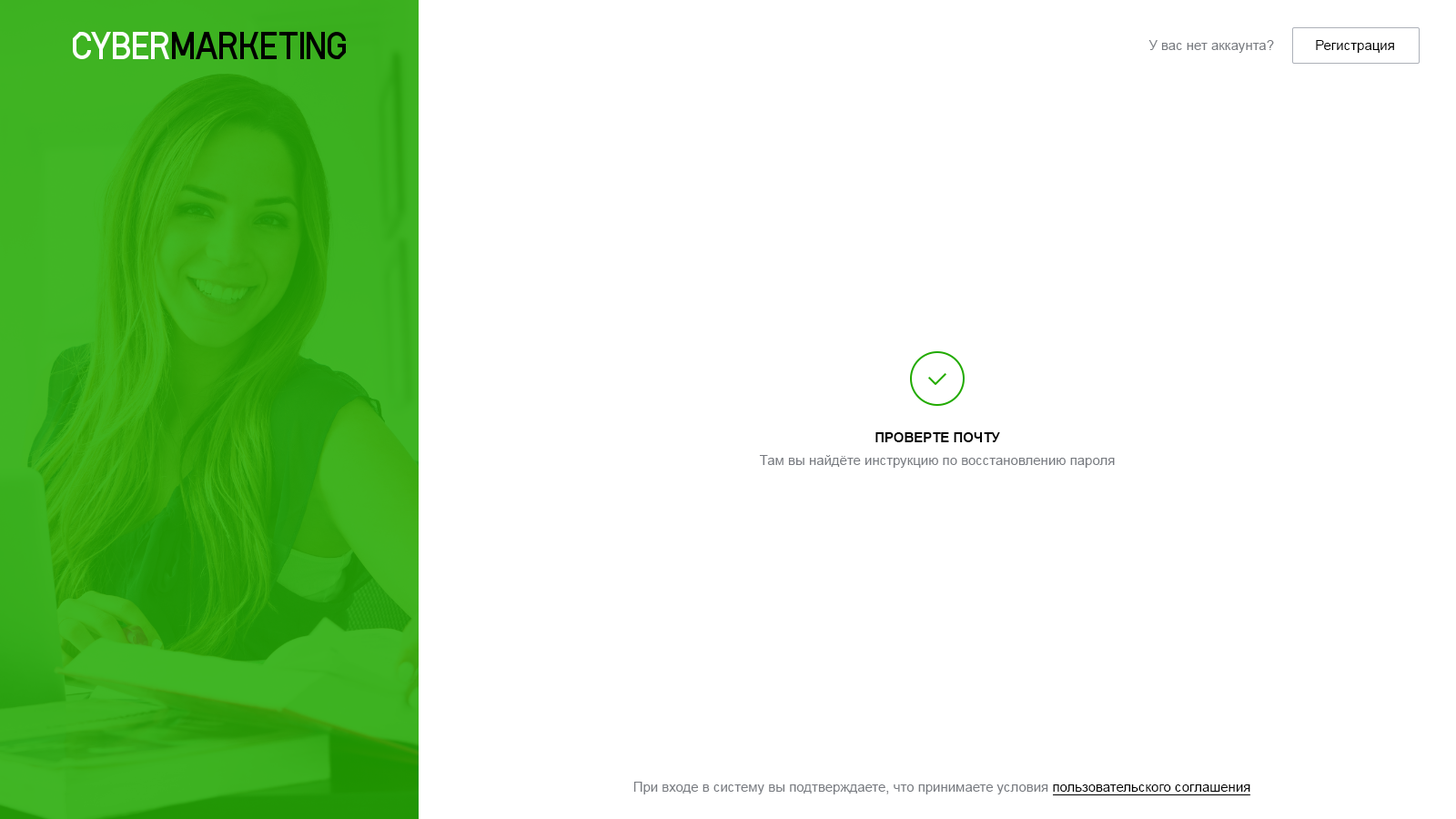
<style>
.page{position:relative;width:1456px;height:819px;background:#ffffff}
.page>*{position:absolute;margin:0}
.t1{font:13.6px "ArialMT";color:#787b81}
.t2{font:13.6px "ArialMT";color:#000000}
.t3{font:13.6px "Arial-BoldMT";color:#000000;text-transform:uppercase}
</style>
<div class="page">
<p class="t1" style="left:1148px;top:40px;width:126px;height:13px">У вас нет аккаунта?</p>
<p class="t2" style="left:1316px;top:40px;width:78px;height:13px">Регистрация</p>
<p class="t3" style="left:875px;top:432px;width:125px;height:10px">Проверте почту</p>
<p class="t1" style="left:759px;top:455px;width:356px;height:13px">Там вы найдёте инструкцию по восстановлению пароля</p>
<p class="t1" style="left:633px;top:782px;width:617px;height:12px">При входе в систему вы подтверждаете, что принимаете условия <span class="t2">пользовательского соглашения</span></p>
</div>
